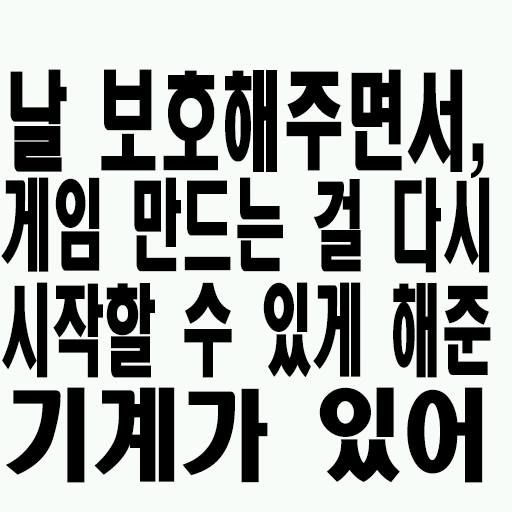
<style>
.page{position:relative;width:512px;height:512px;background:#f8fcf8}
.page>*{position:absolute;margin:0}
.t1{font:98.8px/105px "HeadlineR-HM";color:#000000;scale:0.53 1}
.t2{font:106.4px/105px "HeadlineR-HM";color:#000000;scale:0.58 1}
.t3{font:98.8px/105px "HeadlineR-HM";color:#000000;scale:0.89 1}
</style>
<div class="page">
<p class="t1" style="left:1px;top:69px;width:490px;height:414px;text-align:center"><span class="t2">날 보호해주면서,<br></span>게임 만드는 걸 다시 시작할 수 있게 해준<br><span class="t3">기계가 있어</span></p>
</div>
